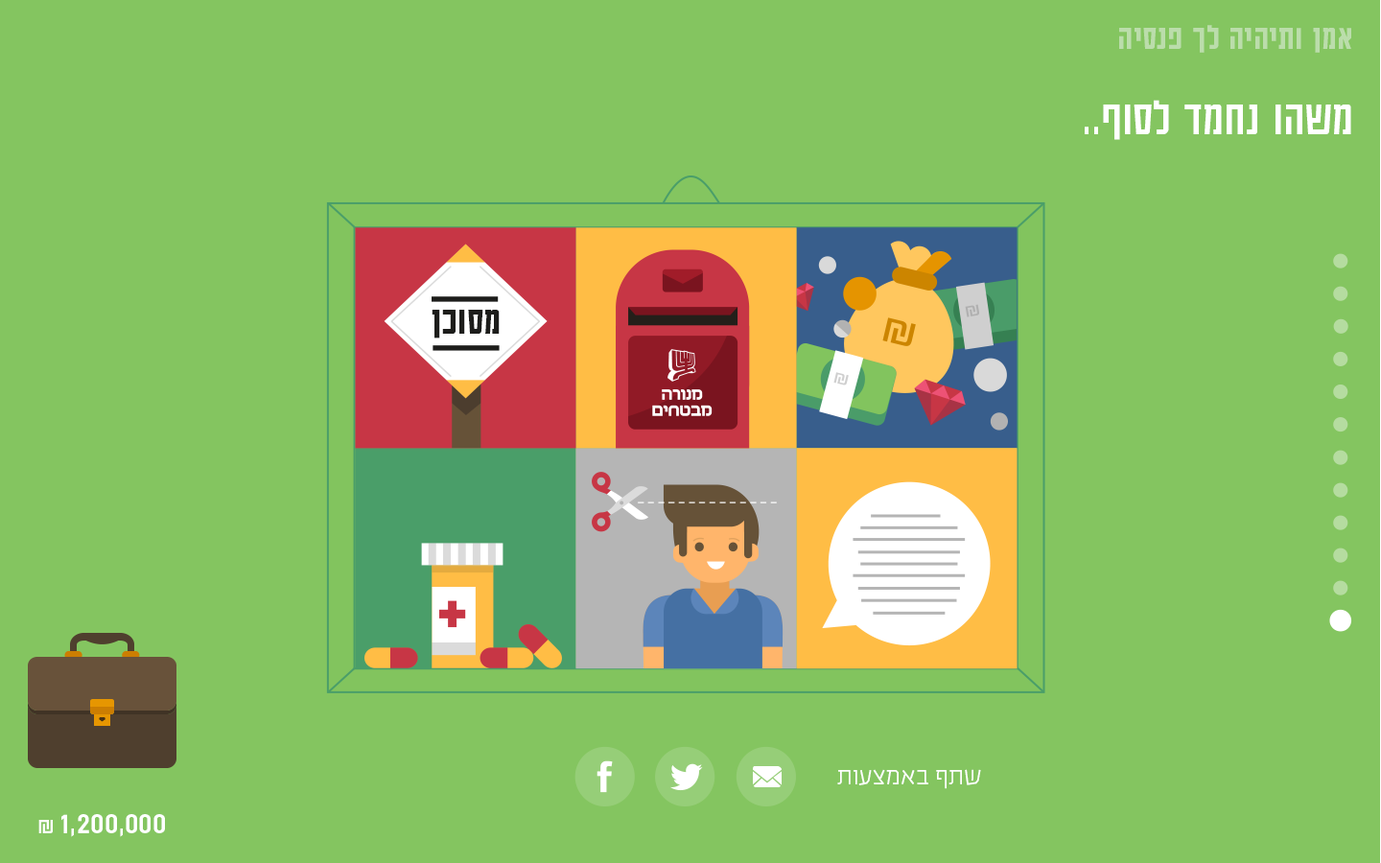
<style>
.page{position:relative;width:1381px;height:863px;background:#84c560}
.page>*{position:absolute;margin:0}
.t1{font:37.8px "AdumaFOT-Medium";color:#bbddab}
.t2{font:53.8px "AdumaFOT-Regular";color:#ffffff}
.t3{font:43.4px "AdumaFOT-Medium";color:#1d1d1b}
.t4{font:28.5px "EzerBlock_OE-Light";color:#ffffff}
.t5{font:33.6px "AdumaFOT-Regular";color:#ffffff}
.t6{font:24px "AdumaFOT-Regular";color:#ffffff}
</style>
<div class="page">
<p class="t1" style="left:1119px;top:25px;width:233px;height:28px">אמן ותיהיה לך פנסיה</p>
<p class="t2" style="left:1085px;top:100px;width:267px;height:40px">משהו נחמד לסוף..</p>
<p class="t3" style="left:432px;top:310px;width:68px;height:29px">מסוכן</p>
<p class="t4" style="left:837px;top:769px;width:144px;height:20px">שתף באמצעות</p>
<p class="t5" style="left:38px;top:814px;width:127px;height:23px">1,200,000<span class="t6"> ₪</span></p>
</div>
